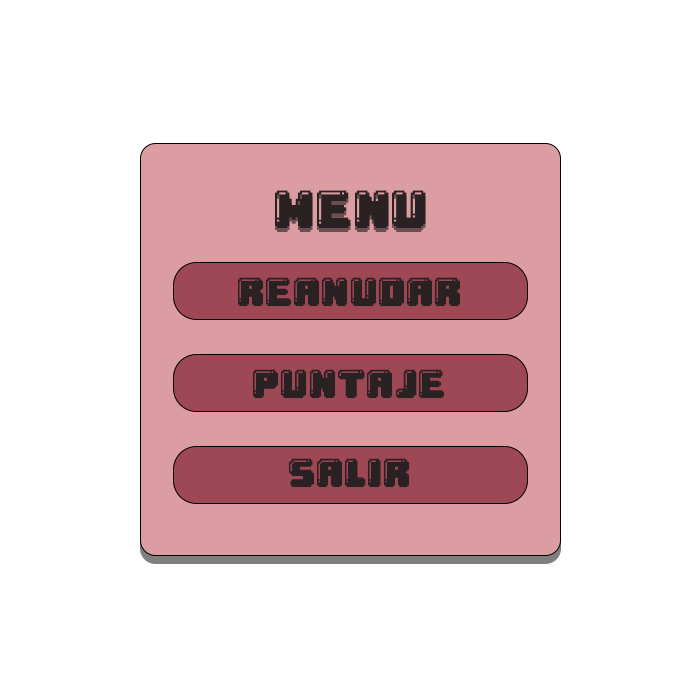
<style>
.page{position:relative;width:700px;height:700px;background:#ffffff}
.page>*{position:absolute;margin:0}
.t1{font:66.7px "Gumball";color:#2a2122}
.t2{font:50px "Gumball";color:#2a2122}
</style>
<div class="page">
<p class="t1" style="left:275px;top:190px;width:151px;height:38px">menu</p>
<p class="t2" style="left:238px;top:277px;width:223px;height:30px">reanudar</p>
<p class="t2" style="left:253px;top:369px;width:192px;height:30px">Puntaje</p>
<p class="t2" style="left:288px;top:458px;width:122px;height:30px">Salir</p>
</div>
